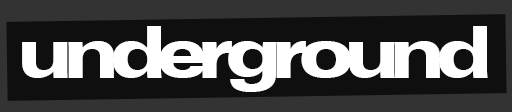
<style>
.page{position:relative;width:512px;height:112px;background:#0f0f0f}
.page>*{position:absolute;margin:0}
.t1{font:72px "ZurichBT-BlackExtended";letter-spacing:-0.12em;color:#ffffff}
</style>
<div class="page">
<p class="t1" style="left:22px;top:26px;width:466px;height:66px">underground</p>
</div>
